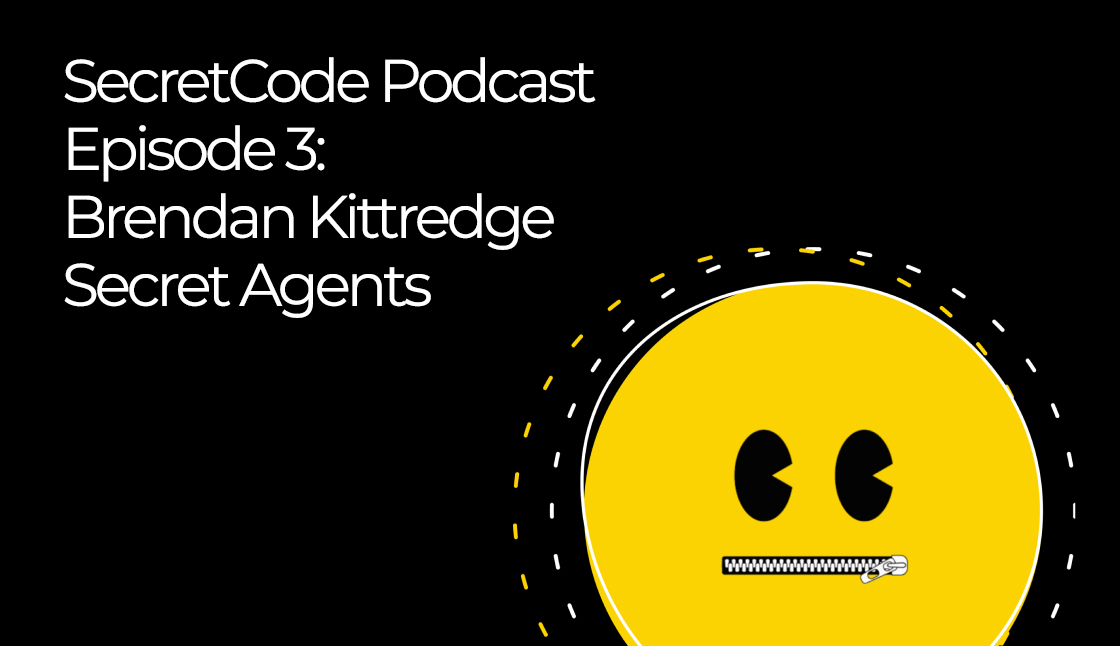
<style>
.page{position:relative;width:1120px;height:646px;background:#000000}
.page>*{position:absolute;margin:0}
.t1{font:60px/68px "Montserrat-Regular";letter-spacing:-0.07em;color:#ffffff}
</style>
<div class="page">
<p class="t1" style="left:64px;top:57px;width:532px;height:261px">SecretCode Podcast<br>Episode 3:<br>Brendan Kittredge<br>Secret Agents</p>
</div>
